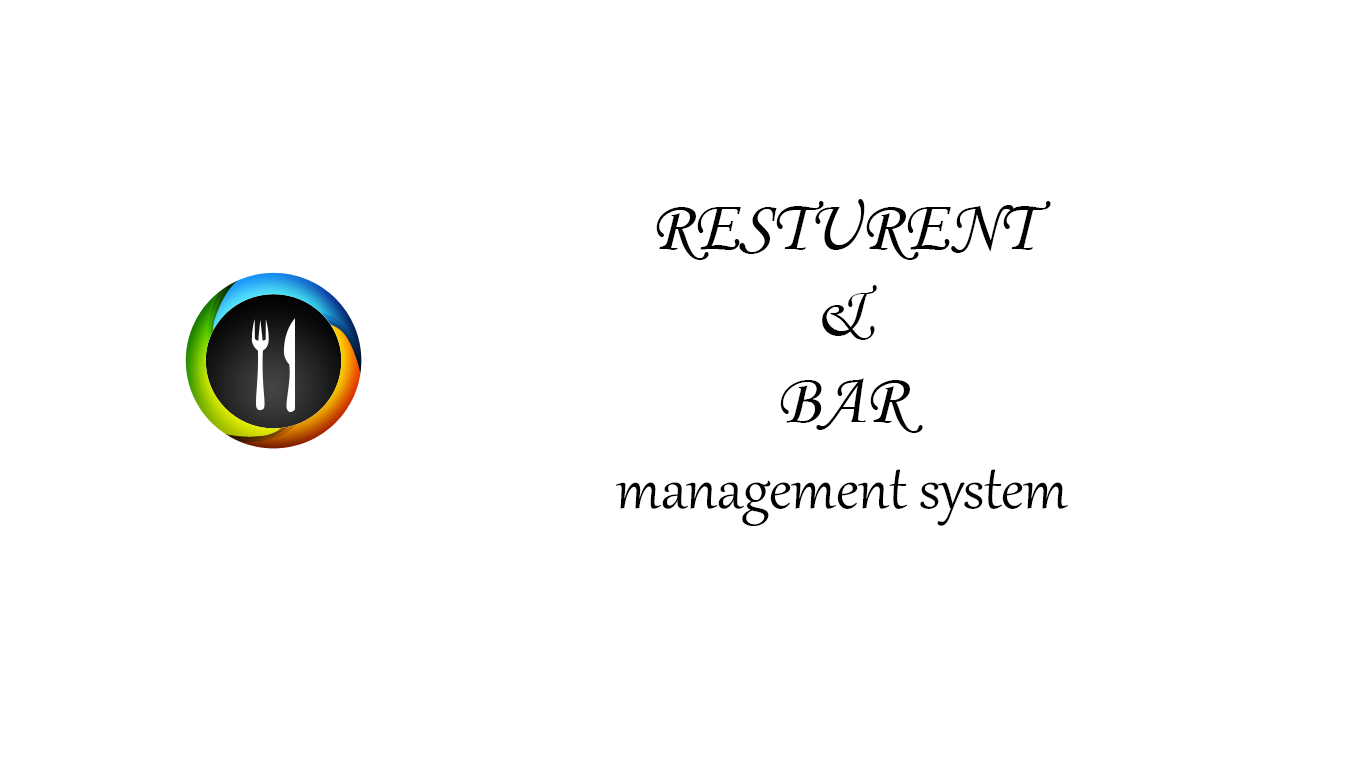
<style>
.page{position:relative;width:1366px;height:768px;background:#ffffff}
.page>*{position:absolute;margin:0}
.t1{font:72px "Gabriola";color:#000000}
.t2{font:72px "MonotypeCorsiva";color:#000000}
</style>
<div class="page">
<p class="t1" style="left:616px;top:199px;width:452px;height:327px;text-align:center"><span class="t2">RESTURENT<br>&amp; <br>BAR<br></span>management system</p>
</div>
